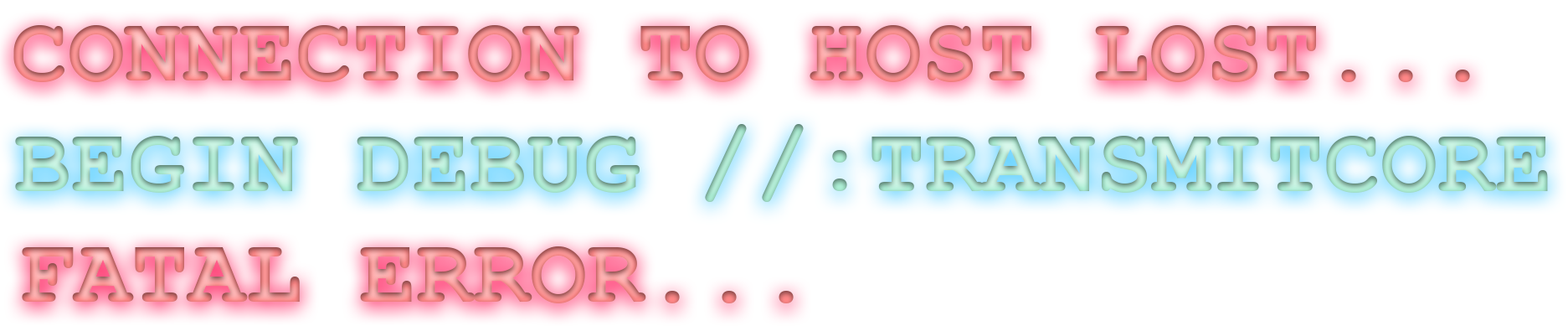
<style>
.page{position:relative;width:1568px;height:326px;background:#ffffff}
.page>*{position:absolute;margin:0}
.t1{font:94.9px "CourierNewPS-BoldMT"}
</style>
<div class="page">
<p class="t1" style="left:13px;top:25px;width:1457px;height:57px">CONNECTION TO HOST LOST...</p>
<p class="t1" style="left:15px;top:124px;width:1533px;height:78px">BEGIN DEBUG //:TRANSMITCORE</p>
<p class="t1" style="left:22px;top:246px;width:772px;height:57px">FATAL ERROR...</p>
</div>
